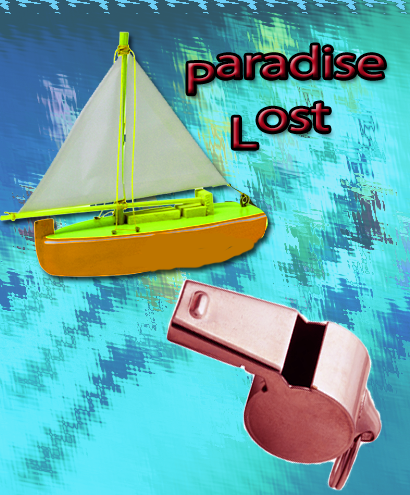
<style>
.page{position:relative;width:410px;height:495px}
.page>*{position:absolute;margin:0}
.t1{font:44.6px "MyriadPro-Regular";letter-spacing:-0.025em;scale:1.36 1}
</style>
<div class="page">
<p class="t1" style="left:188px;top:45px;width:196px;height:103px">Paradise<br>    Lost</p>
</div>
